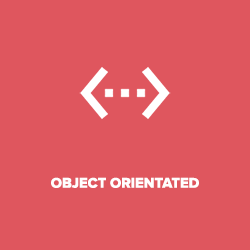
<style>
.page{position:relative;width:250px;height:250px;background:#df565e}
.page>*{position:absolute;margin:0}
.t1{font:14.6px "ProximaNova-Extrabld";color:#fffefe}
</style>
<div class="page">
<p class="t1" style="left:51px;top:177px;width:148px;height:11px">OBJECT ORIENTATED</p>
</div>
